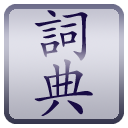
<style>
.page{position:relative;width:128px;height:128px}
.page>*{position:absolute;margin:0}
.t1{font:65px "STKaiti";color:#180b43}
.t2{font:65px "STKaiti";color:#180b44}
</style>
<div class="page">
<p class="t1" style="left:34px;top:10px;width:54px;height:51px">詞</p>
<p class="t2" style="left:34px;top:59px;width:59px;height:57px">典</p>
</div>
